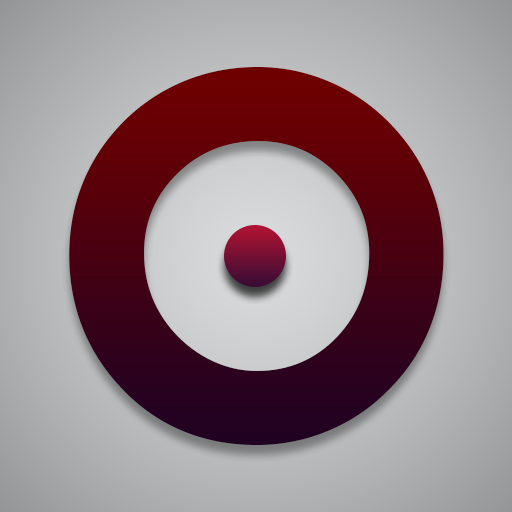
<style>
.page{position:relative;width:512px;height:512px}
.page>*{position:absolute;margin:0}
.t1{font:512px "AvantGardeITCbyBT-Demi";letter-spacing:0.04em}
</style>
<div class="page">
<p class="t1" style="left:69px;top:67px;width:375px;height:378px">O</p>
</div>
